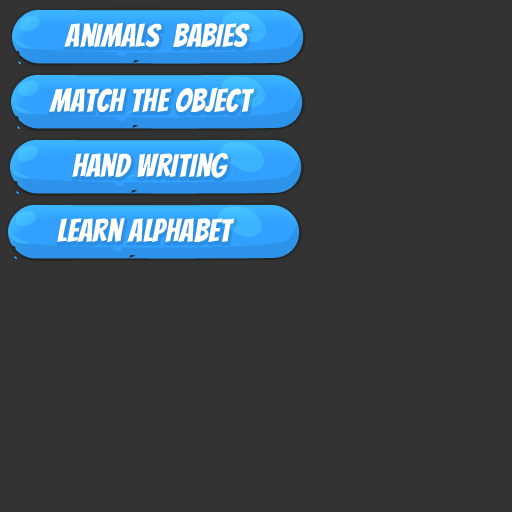
<style>
.page{position:relative;width:512px;height:512px;background:#333333}
.page>*{position:absolute;margin:0}
.t1{font:32px "Bangers-Regular";letter-spacing:0.01em;color:#ffffff}
</style>
<div class="page">
<p class="t1" style="left:64px;top:22px;width:186px;height:25px">Animals  Babies</p>
<p class="t1" style="left:49px;top:87px;width:206px;height:25px">Match the Object</p>
<p class="t1" style="left:72px;top:153px;width:157px;height:25px">Hand writing</p>
<p class="t1" style="left:57px;top:218px;width:178px;height:24px">learn Alphabet</p>
</div>
